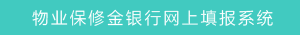
<style>
.page{position:relative;width:300px;height:35px;background:#41cac0}
.page>*{position:absolute;margin:0}
.t1{font:17px "FZLTXHK";letter-spacing:0.1em;color:#ffffff}
</style>
<div class="page">
<p class="t1" style="left:32px;top:9px;width:241px;height:17px">物业保修金银行网上填报系统</p>
</div>
